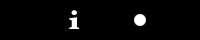
<style>
.page{position:relative;width:200px;height:40px;background:#000000}
.page>*{position:absolute;margin:0}
.t1{font:28px "Baskerville-Bold";color:#ffffff;scale:1.15 1}
</style>
<div class="page">
<p class="t1" style="left:69px;top:10px;width:10px;height:19px">i</p>
</div>
